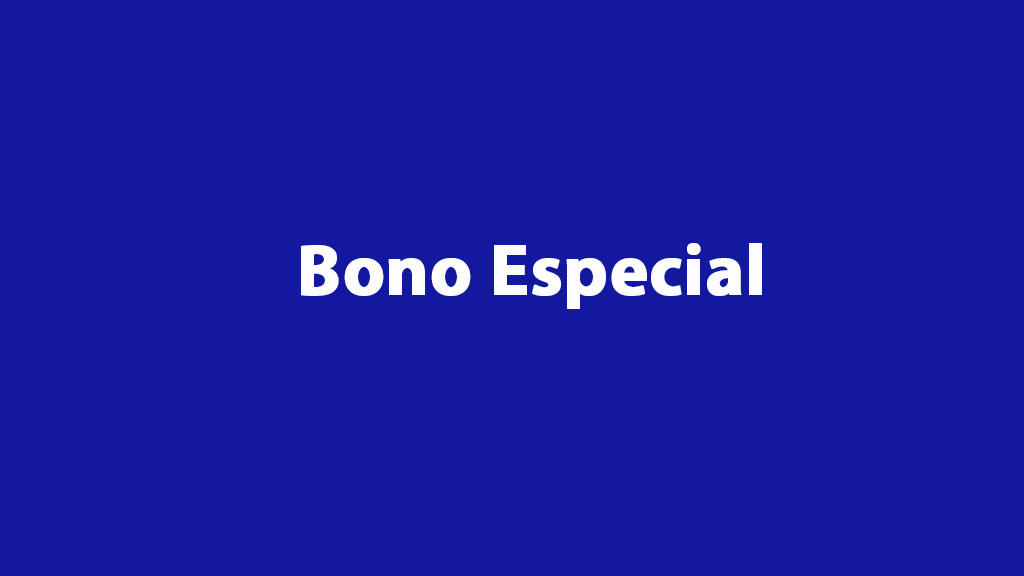
<style>
.page{position:relative;width:1024px;height:576px;background:#13199e}
.page>*{position:absolute;margin:0}
.t1{font:72px "MyriadPro-Bold";color:#fefdfd;font-weight:bold}
</style>
<div class="page">
<p class="t1" style="left:301px;top:243px;width:461px;height:66px">Bono Especial</p>
</div>
